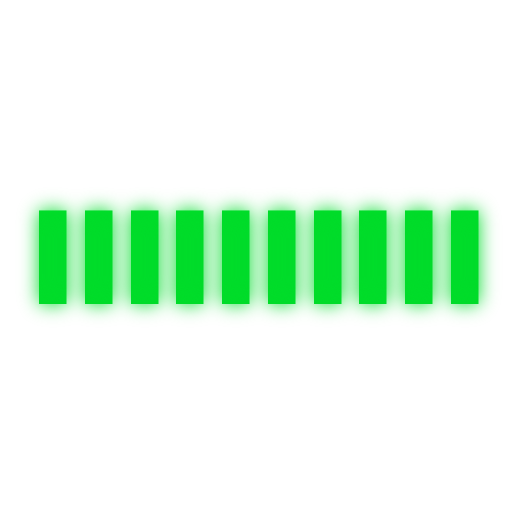
<style>
.page{position:relative;width:512px;height:512px;background:#ffffff}
.page>*{position:absolute;margin:0}
.t1{font:125px "Saracen-HTF-Black";letter-spacing:0.1em;color:#00dc29}
</style>
<div class="page">
<p class="t1" style="left:39px;top:210px;width:440px;height:94px">||||||||||</p>
</div>
